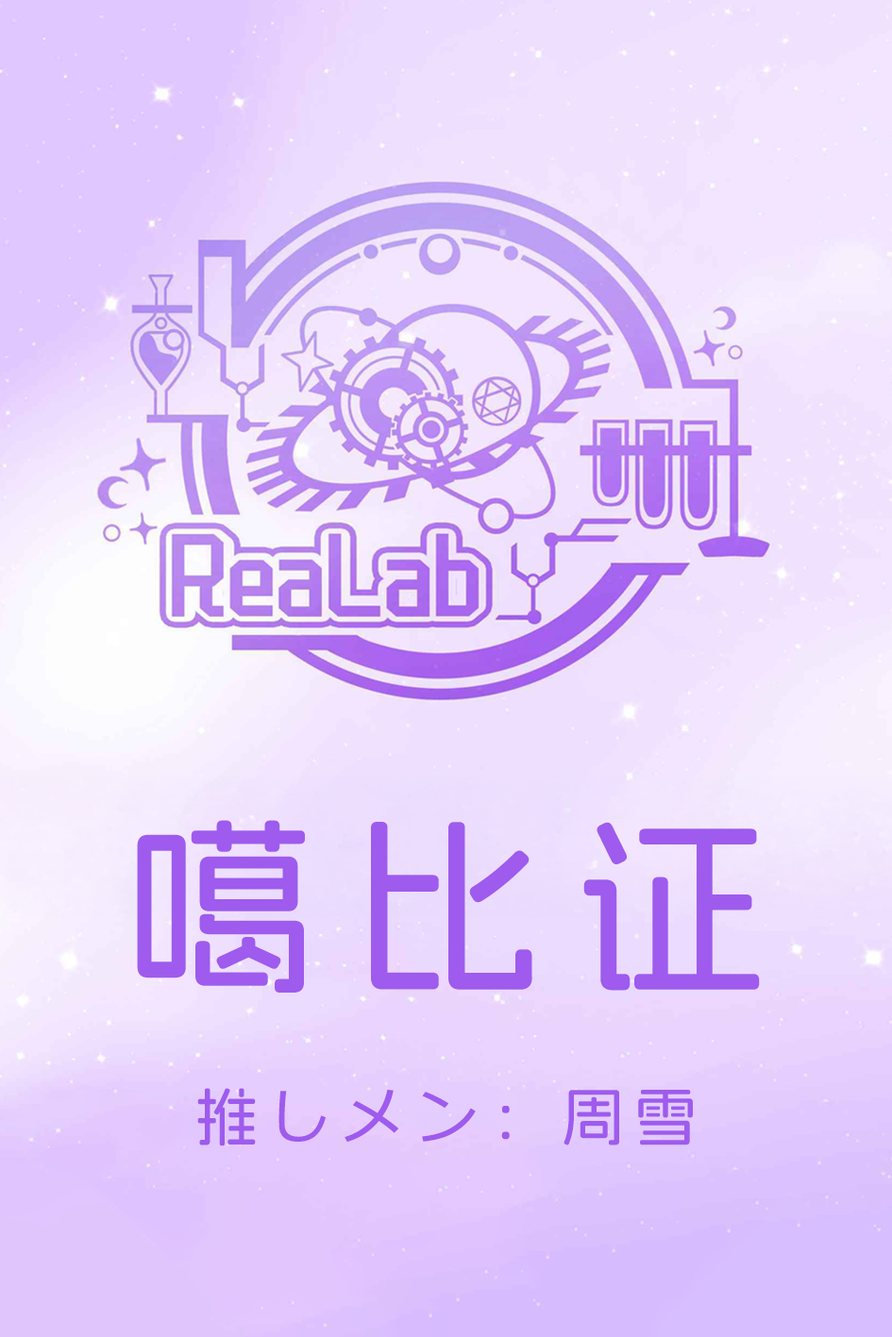
<style>
.page{position:relative;width:892px;height:1337px}
.page>*{position:absolute;margin:0}
.t1{font:188.7px "AlimamaFangYuanTiVF-Medium";letter-spacing:0.2em;color:#9e5bed;font-weight:bold}
.t2{font:62.9px "Meiryo";letter-spacing:0.15em;color:#9e5bed;font-weight:bold}
.t3{font:62.9px "AlimamaFangYuanTiVF-Medium";letter-spacing:0.15em;color:#9e5bed;font-weight:bold}
</style>
<div class="page">
<p class="t1" style="left:137px;top:820px;width:623px;height:173px">噶比证</p>
<p class="t2" style="left:197px;top:1088px;width:496px;height:59px"><span class="t3">推</span>しメン<span class="t3">：周雪</span></p>
</div>
